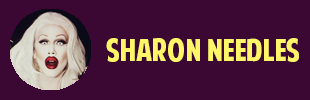
<style>
.page{position:relative;width:310px;height:100px;background:#3b0833}
.page>*{position:absolute;margin:0}
.t1{font:30px "AmericanPurpose";color:#fff568}
.t2{font:24px "Tahoma";color:#ffffff}
</style>
<div class="page">
<p class="t1" style="left:106px;top:38px;width:193px;height:24px"><span class="t2"><br></span>Sharon Needles</p>
</div>
